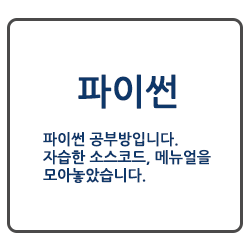
<style>
.page{position:relative;width:250px;height:250px;background:#ffffff}
.page>*{position:absolute;margin:0}
.t1{font:36px "NanumGothicBold";color:#0e3769}
.t2{font:15px "NanumGothicBold";color:#0e3769}
</style>
<div class="page">
<p class="t1" style="left:78px;top:74px;width:99px;height:35px">파이썬</p>
<p class="t2" style="left:43px;top:132px;width:168px;height:51px">파이썬 공부방입니다.<br>자습한 소스코드, 메뉴얼을<br>모아놓았습니다.</p>
</div>
